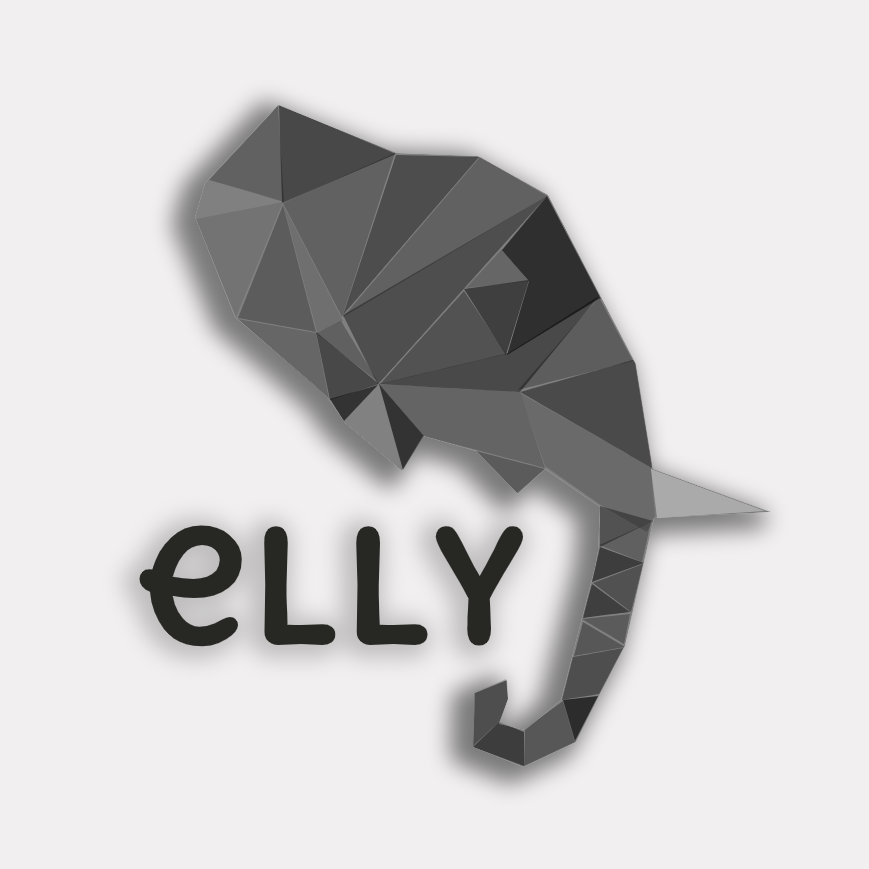
<style>
.page{position:relative;width:869px;height:869px;background:#f1efef}
.page>*{position:absolute;margin:0}
.t1{font:155px "DeliusUnicase-Bold";color:#272724}
</style>
<div class="page">
<p class="t1" style="left:139px;top:525px;width:384px;height:122px">eLLY</p>
</div>
